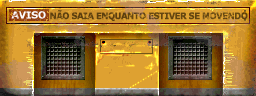
<style>
.page{position:relative;width:256px;height:96px}
.page>*{position:absolute;margin:0}
.t1{font:9.5px "Verdana-Bold";color:#ffffff}
.t2{font:9px "Verdana-Bold";letter-spacing:-0.06em;color:#644610;font-weight:bold;scale:0.91 1}
</style>
<div class="page">
<p class="t1" style="left:11px;top:11px;width:35px;height:8px">AVISO</p>
<p class="t2" style="left:50px;top:10px;width:198px;height:11px">NÃO SAIA ENQUANTO ESTIVER SE MOVENDO</p>
</div>
